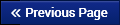
<style>
.page{position:relative;width:120px;height:25px}
.page>*{position:absolute;margin:0}
.t1{font:21.8px "Roboto-Medium";color:#ffffff}
</style>
<div class="page">
<p class="t1" style="left:26px;top:7px;width:82px;height:13px">Previous Page</p>
<p class="t1" style="left:26px;top:7px;width:82px;height:13px">Previous Page</p>
</div>
